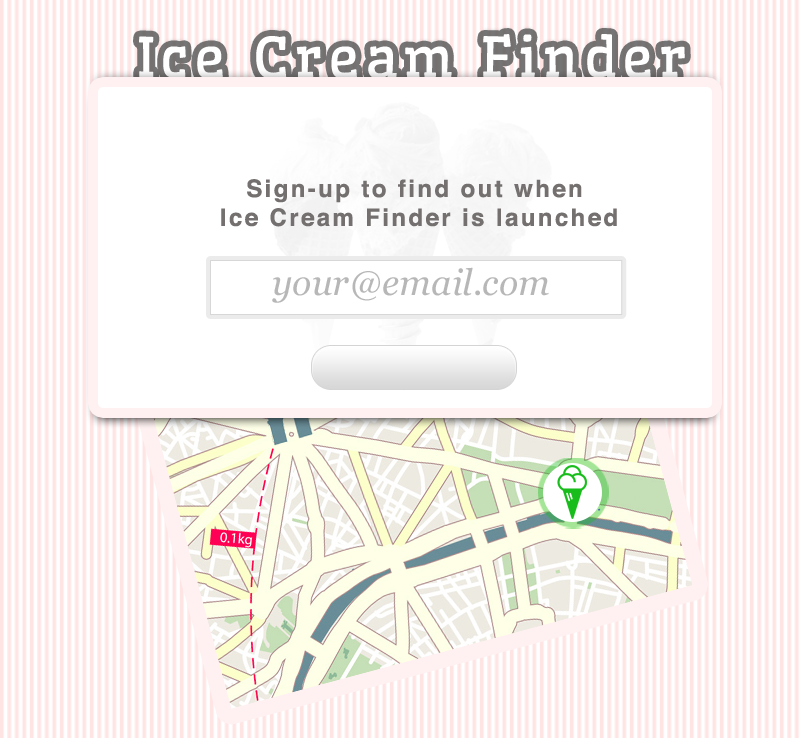
<style>
.page{position:relative;width:800px;height:738px;background:#ffffff}
.page>*{position:absolute;margin:0}
.t1{font:55px "Wellfleet-Regular";letter-spacing:0.1em;color:#ffffff}
.t2{font:24px "Helvetica-Bold";letter-spacing:0.1em;color:#757070}
.t3{font:36px "Georgia-Italic";color:#b7b7b7}
</style>
<div class="page">
<p class="t1" style="left:139px;top:34px;width:546px;height:46px">Ice Cream Finder</p>
<p class="t2" style="left:221px;top:179px;width:396px;height:48px;text-align:center">Sign-up to find out when <br>Ice Cream Finder is launched</p>
<p class="t3" style="left:272px;top:267px;width:277px;height:36px">your@email.com</p>
</div>
